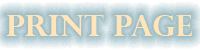
<style>
.page{position:relative;width:200px;height:50px}
.page>*{position:absolute;margin:0}
.t1{font:29.2px "PerpetuaTitlingMT-Bold";color:#ffe5b9}
</style>
<div class="page">
<p class="t1" style="left:6px;top:14px;width:186px;height:22px">Print Page</p>
</div>
